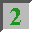
<style>
.page{position:relative;width:32px;height:32px;background:#bbbbbb}
.page>*{position:absolute;margin:0}
.t1{font:25px "TimesNewRomanPS-BoldMT";color:#1e911e}
</style>
<div class="page">
<p class="t1" style="left:10px;top:8px;width:11px;height:17px">2</p>
</div>
